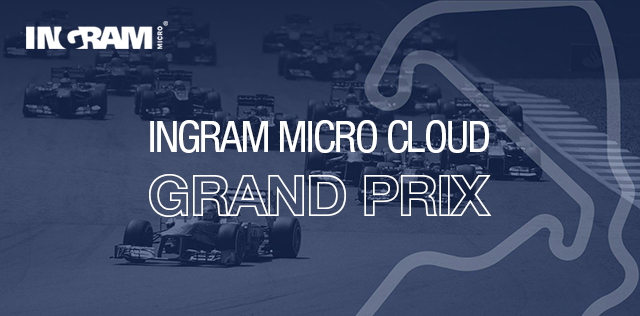
<style>
.page{position:relative;width:640px;height:316px}
.page>*{position:absolute;margin:0}
.t1{font:43.9px "HelveticaNeueLTPro-Cn";letter-spacing:-0.045em;color:#ffffff}
.t2{font:57.9px "HelveticaNeueLTPro-BdOu";letter-spacing:-0.045em;color:#ffffff}
</style>
<div class="page">
<p class="t1" style="left:150px;top:120px;width:339px;height:33px">INGRAM MICRO CLOUD</p>
<p class="t2" style="left:149px;top:174px;width:343px;height:43px">GRAND PRIX</p>
</div>
